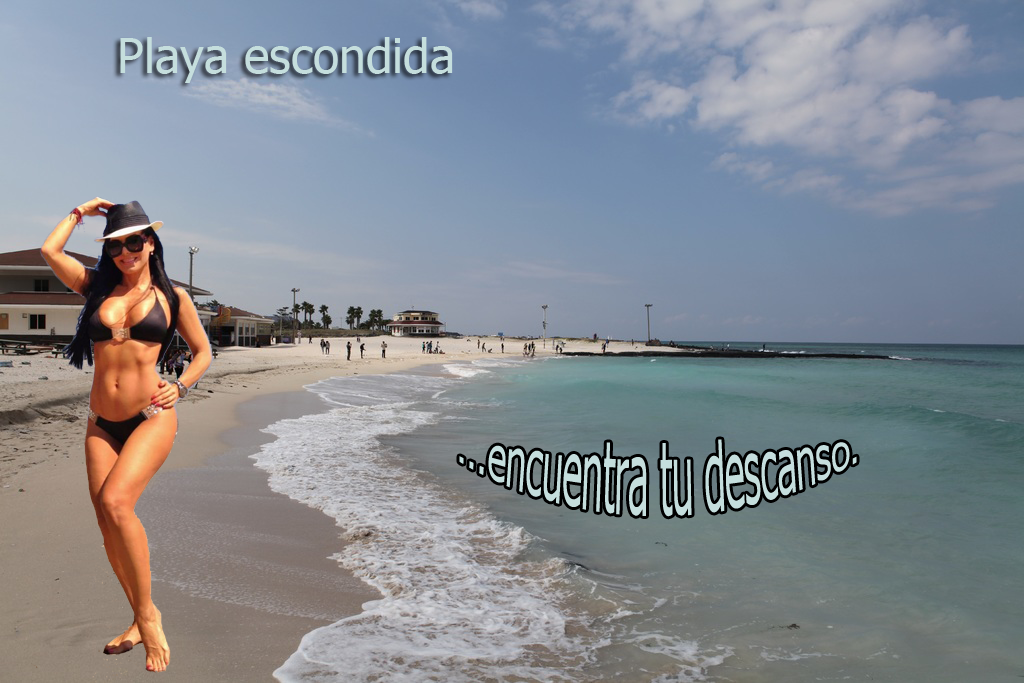
<style>
.page{position:relative;width:1024px;height:683px}
.page>*{position:absolute;margin:0}
.t1{font:48px "Tahoma";color:#c5dedd}
.t2{font:36px "Tahoma";color:#c5dedd}
</style>
<div class="page">
<p class="t1" style="left:120px;top:37px;width:333px;height:46px">Playa escondida</p>
<p class="t2" style="left:459px;top:439px;width:398px;height:78px">...encuentra tu descanso.</p>
</div>
